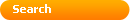
<style>
.page{position:relative;width:130px;height:20px}
.page>*{position:absolute;margin:0}
.t1{font:11px "Tahoma-Bold";color:#fefefe}
</style>
<div class="page">
<p class="t1" style="left:13px;top:4px;width:38px;height:9px">Search</p>
</div>
